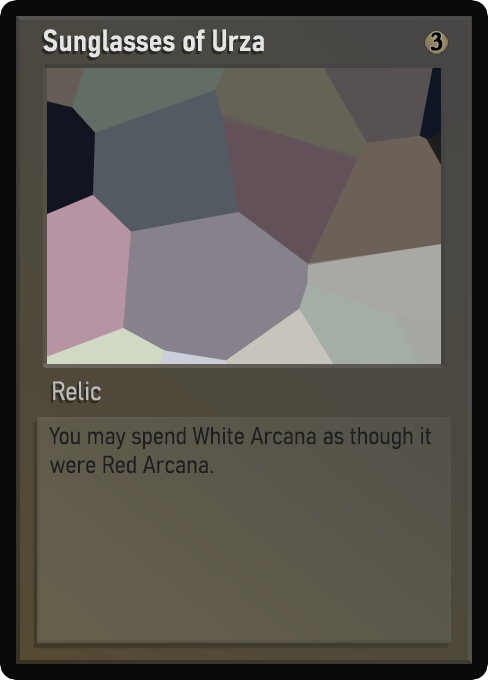
<style>
.page{position:relative;width:488px;height:680px}
.page>*{position:absolute;margin:0}
.t1{font:30px "Bahnschrift-SemiBoldSemiCondensed";color:#f2f2f2;font-weight:bold}
.t2{font:25px "WTRRoycroft";color:#000000;font-weight:bold;scale:1.09 1}
.t3{font:26px "Bahnschrift-LightSemiCondensed";color:#c8c8c8;font-weight:bold}
.t4{font:24px "Bahnschrift-LightSemiCondensed";color:#1e1e1e;font-weight:bold}
</style>
<div class="page">
<p class="t1" style="left:43px;top:29px;width:221px;height:29px;opacity:0.9">Sunglasses of Urza</p>
<p class="t2" style="left:430px;top:32px;width:13px;height:19px">3</p>
<p class="t3" style="left:53px;top:381px;width:48px;height:20px;opacity:0.9">Relic</p>
<p class="t4" style="left:49px;top:427px;width:382px;height:47px">You may spend White Arcana as though it were Red Arcana.</p>
</div>
